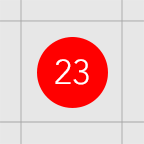
<style>
.page{position:relative;width:144px;height:144px;background:#e7e7e7}
.page>*{position:absolute;margin:0}
.t1{font:34.3px "Avenir-Light";color:#ffffff}
</style>
<div class="page">
<p class="t1" style="left:55px;top:59px;width:34px;height:26px">23</p>
</div>
